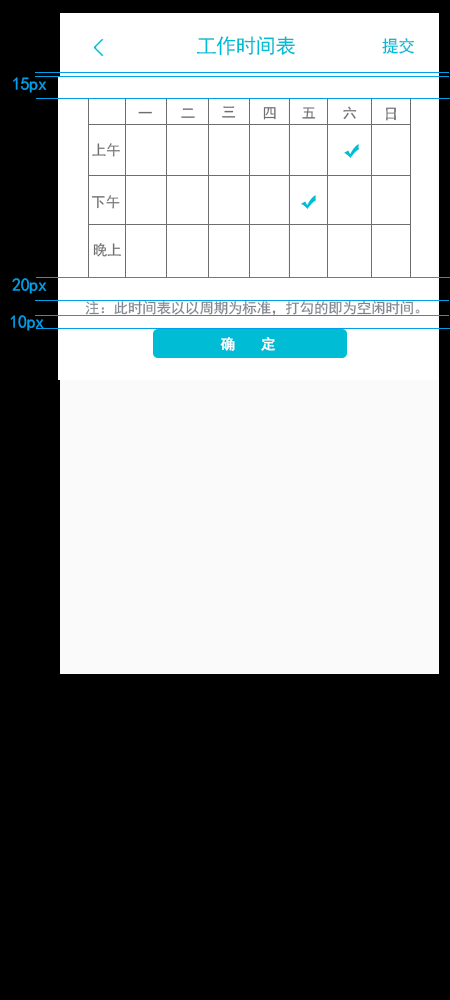
<style>
.page{position:relative;width:450px;height:1000px;background:#000000}
.page>*{position:absolute;margin:0}
.t1{font:20.2px "SimHei";letter-spacing:-0.02em;color:#00bcd4}
.t2{font:16.8px "SimHei";letter-spacing:-0.02em;color:#00bcd4}
.t3{font:18px "SimHei";letter-spacing:-0.02em;color:#00a0e9}
.t4{font:14.6px "SimHei";letter-spacing:-0.02em;color:#6e6e6e}
.t5{font:14.6px "SimHei";letter-spacing:-0.02em;color:#808792}
.t6{font:14.6px "SimHei";letter-spacing:0.02em;color:#ffffff;font-weight:bold}
</style>
<div class="page">
<p class="t1" style="left:196px;top:36px;width:99px;height:20px">工作时间表</p>
<p class="t2" style="left:382px;top:38px;width:32px;height:16px">提交</p>
<p class="t3" style="left:13px;top:77px;width:34px;height:16px">15px</p>
<p class="t4" style="left:138px;top:111px;width:14px;height:3px">一</p>
<p class="t4" style="left:181px;top:108px;width:14px;height:10px">二</p>
<p class="t4" style="left:222px;top:106px;width:14px;height:12px">三</p>
<p class="t4" style="left:263px;top:107px;width:13px;height:13px">四</p>
<p class="t4" style="left:302px;top:107px;width:14px;height:12px">五</p>
<p class="t4" style="left:343px;top:106px;width:14px;height:14px">六</p>
<p class="t4" style="left:386px;top:107px;width:10px;height:14px">日</p>
<p class="t4" style="left:92px;top:143px;width:28px;height:14px">上午</p>
<p class="t4" style="left:91px;top:195px;width:29px;height:14px">下午</p>
<p class="t4" style="left:93px;top:243px;width:28px;height:14px">晚上</p>
<p class="t3" style="left:12px;top:278px;width:35px;height:16px">20px</p>
<p class="t5" style="left:85px;top:301px;width:335px;height:15px">注：此时间表以以周期为标准，打勾的即为空闲时间。</p>
<p class="t3" style="left:10px;top:315px;width:34px;height:16px">10px</p>
<p class="t6" style="left:220px;top:337px;width:55px;height:14px">确  定</p>
</div>
